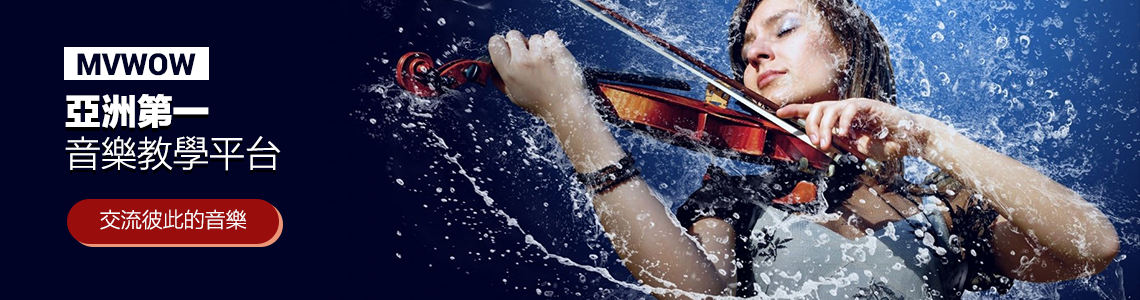
<style>
.page{position:relative;width:1140px;height:300px;background:#000326}
.page>*{position:absolute;margin:0}
.t1{font:30px "Roboto-Black";color:#000326}
.t2{font:36px/42px "FZLTXHB--B51-0"}
.t3{font:36px/42px "FZLTTHB--B51-0"}
.t4{font:36px/42px "FZLTXHB--B51-0";color:#ffffff}
.t5{font:36px/42px "FZLTTHB--B51-0";color:#ffffff}
.t6{font:21px "FZLTXHB--B51-0";color:#fffefe}
</style>
<div class="page">
<p class="t1" style="left:77px;top:53px;width:119px;height:23px">MVWOW</p>
<p class="t2" style="left:65px;top:98px;width:216px;height:77px"><span class="t3">亞洲第一<br></span>音樂教學平台</p>
<p class="t4" style="left:65px;top:94px;width:216px;height:77px"><span class="t5">亞洲第一<br></span>音樂教學平台</p>
<p class="t6" style="left:100px;top:209px;width:147px;height:21px">交流彼此的音樂</p>
</div>
